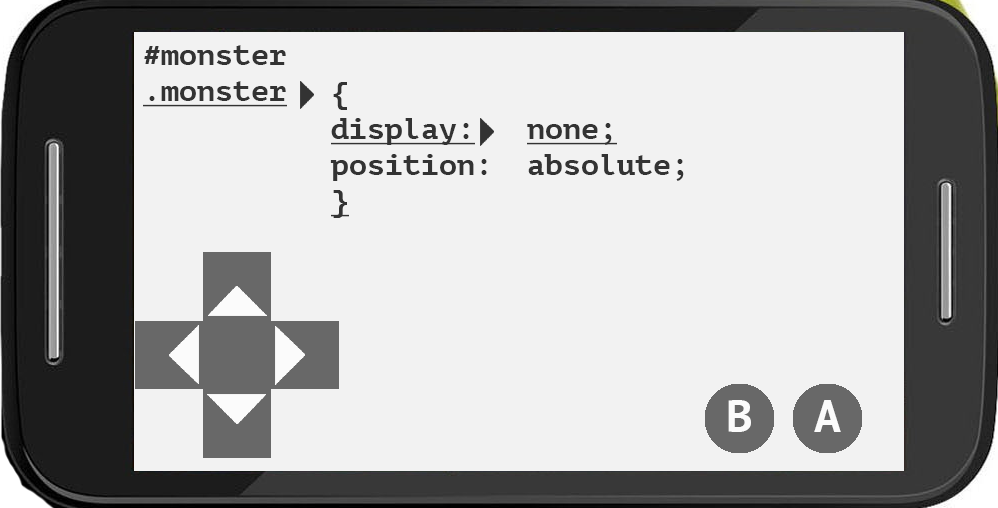
<style>
.page{position:relative;width:998px;height:508px;background:#f2f2f2}
.page>*{position:absolute;margin:0}
.t1{font:30px "PTMono-Bold";color:#333333}
.t2{font:30px "PTMono-Bold";color:#333333;text-decoration:underline}
.t3{font:45.5px "PTMono-Bold";color:#ffffff}
</style>
<div class="page">
<p class="t1" style="left:143px;top:45px;width:144px;height:62px">#monster<br><span class="t2">.monster</span></p>
<p class="t1" style="left:330px;top:82px;width:157px;height:136px">{<br><span class="t2">display:<br></span>position:<br><span class="t2">}</span></p>
<p class="t1" style="left:527px;top:123px;width:157px;height:58px"><span class="t2">none;<br></span>absolute;</p>
<p class="t3" style="left:728px;top:400px;width:23px;height:32px">B</p>
<p class="t3" style="left:814px;top:400px;width:27px;height:32px">A</p>
</div>
